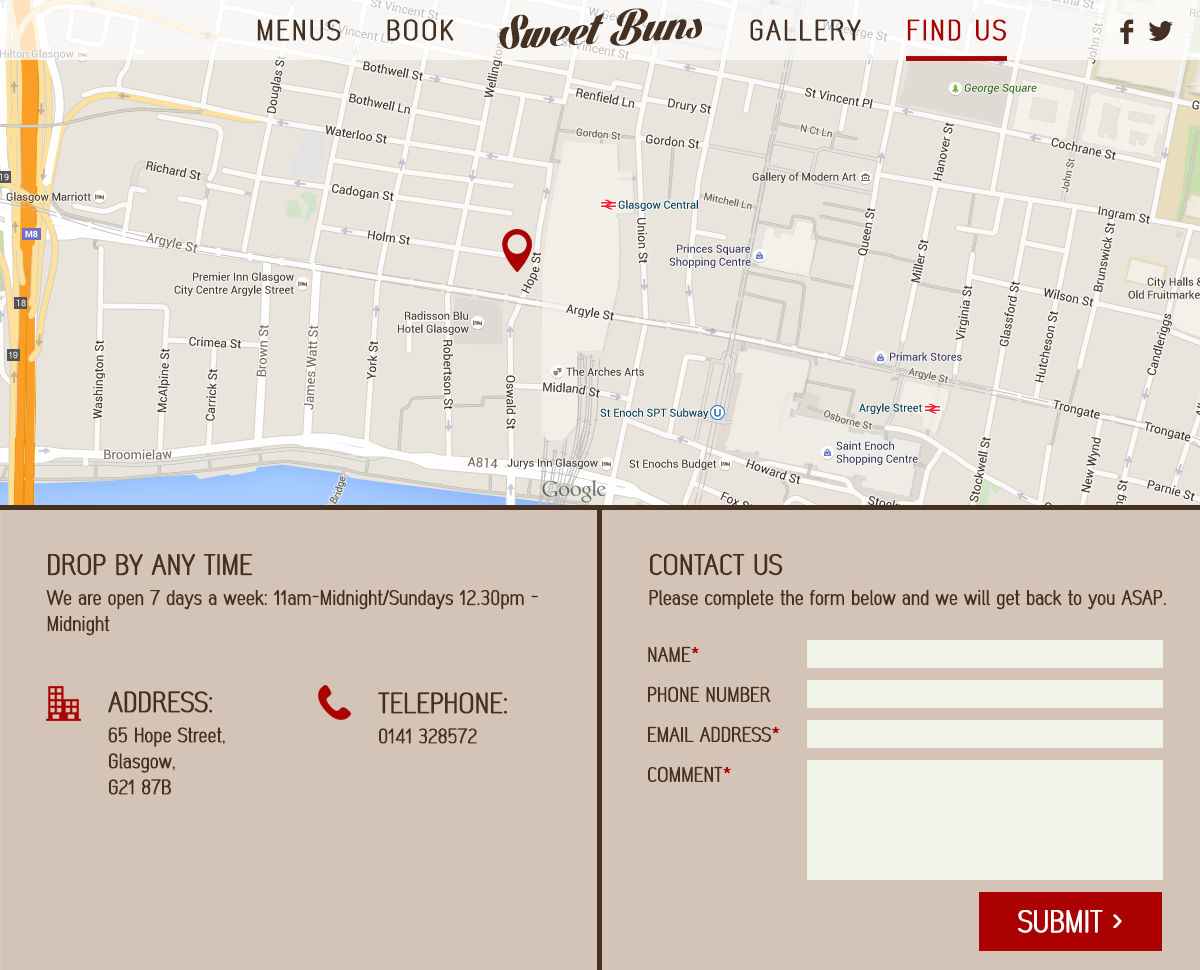
<style>
.page{position:relative;width:1200px;height:970px;background:#d3c4b7}
.page>*{position:absolute;margin:0}
.t1{font:49px "LighthousePersonalUse";color:#463021}
.t2{font:28px "MonaBella";letter-spacing:0.08em;color:#463021;text-transform:uppercase}
.t3{font:28px "MonaBella";letter-spacing:0.08em;color:#aa0000;text-transform:uppercase}
.t4{font:40px "Socialico";letter-spacing:0.2em;color:#463021}
.t5{font:42px "Socialico";letter-spacing:0.2em;color:#463021}
.t6{font:20px/26px "MonaBella";color:#463021}
.t7{font:28px/30px "MonaBella";color:#463021}
.t8{font:20px/30px "MonaBella";color:#463021}
.t9{font:20px/26px "MinionPro-Regular";color:#463021}
.t10{font:20px/20px "MonaBella";color:#463021;text-transform:uppercase}
.t11{font:20px/20px "MonaBella";color:#aa0000;text-transform:uppercase}
.t12{font:30px "MonaBella";color:#ffffff;text-transform:uppercase}
</style>
<div class="page">
<p class="t1" style="left:499px;top:8px;width:203px;height:41px;rotate:-3deg">Sweet Buns</p>
<p class="t2" style="left:257px;top:19px;width:197px;height:22px">Menus    Book</p>
<p class="t2" style="left:750px;top:19px;width:256px;height:22px">Gallery   <span class="t3"> Find us</span></p>
<p class="t4" style="left:1120px;top:19px;width:53px;height:25px">F<span class="t5">L</span></p>
<p class="t6" style="left:46px;top:553px;width:492px;height:83px"><span class="t7">DROP BY ANY TIME<br></span><span class="t8">W</span>e are open 7 days a week: 11am-Midnight/Sundays 12<span class="t9">.</span>30pm - Midnight</p>
<p class="t6" style="left:649px;top:553px;width:518px;height:57px"><span class="t7">CONTACT US<br></span><span class="t8">P</span>lease complete the form below and we will get back to you ASAP<span class="t9">.</span></p>
<p class="t10" style="left:648px;top:646px;width:132px;height:136px">Name<span class="t11">*<br></span><br>Phone number<br><br>Email Address<span class="t11">*<br></span><br>Comment<span class="t11">*</span></p>
<p class="t6" style="left:108px;top:691px;width:117px;height:104px"><span class="t7">ADDRESS:<br></span><span class="t8">6</span>5 Hope Street, <br>Glasgow, <br>G21 87B</p>
<p class="t8" style="left:378px;top:692px;width:129px;height:52px"><span class="t7">TELEPHONE:<br></span>0141 328572</p>
<p class="t12" style="left:1018px;top:909px;width:104px;height:24px">SUBMIT &gt;</p>
</div>
